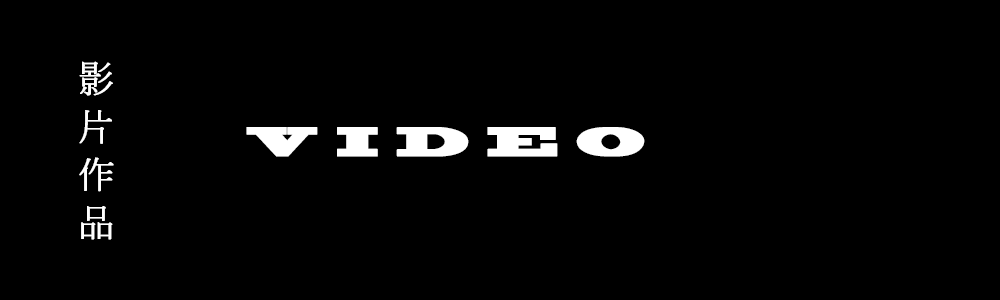
<style>
.page{position:relative;width:1000px;height:300px;background:#000000}
.page>*{position:absolute;margin:0}
.t1{font:36px/48px "AdobeMingStd-Light";letter-spacing:0.456em;color:#fefefe;font-weight:bold}
.t2{font:39px "BlackoakStd";letter-spacing:0.456em;color:#ffffff;font-weight:bold}
</style>
<div class="page">
<p class="t1" style="left:79px;top:61px;width:35px;height:179px;text-align:center">影<br>片<br>作<br>品</p>
<p class="t2" style="left:246px;top:127px;width:399px;height:30px">VIDEO</p>
</div>
